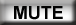
<style>
.page{position:relative;width:76px;height:25px}
.page>*{position:absolute;margin:0}
.t1{font:18px "Arial-BoldMT";color:#020202}
</style>
<div class="page">
<p class="t1" style="left:14px;top:6px;width:49px;height:14px">MUTE</p>
</div>
